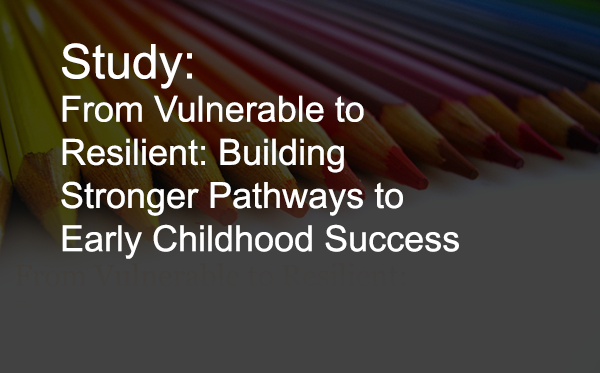
<style>
.page{position:relative;width:600px;height:373px;background:#424242}
.page>*{position:absolute;margin:0}
.t1{font:36px "ArialMT";color:#ffffff}
.t2{font:48px "ArialMT";color:#ffffff}
</style>
<div class="page">
<p class="t1" style="left:61px;top:43px;width:398px;height:216px"><span class="t2">Study: <br></span>From Vulnerable to <br>Resilient: Building <br>Stronger Pathways to Early Childhood Success</p>
</div>
